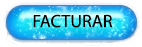
<style>
.page{position:relative;width:142px;height:47px}
.page>*{position:absolute;margin:0}
.t1{font:18px "MyriadPro-Regular";color:#000000}
</style>
<div class="page">
<p class="t1" style="left:33px;top:14px;width:80px;height:14px">FACTURAR</p>
</div>
